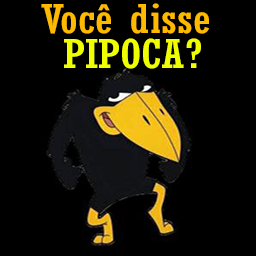
<style>
.page{position:relative;width:256px;height:256px;background:#000000}
.page>*{position:absolute;margin:0}
.t1{font:39.4px "Rockwell-Condensed";color:#ffba00;scale:1.31 1}
.t2{font:39.4px "Rockwell-Condensed";color:#f0ff00;scale:1.31 1}
</style>
<div class="page">
<p class="t1" style="left:41px;top:3px;width:168px;height:31px">Você disse</p>
<p class="t2" style="left:64px;top:38px;width:137px;height:31px">PIPOCA?</p>
</div>
